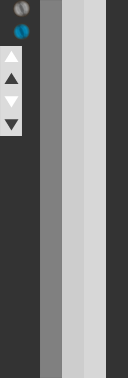
<style>
.page{position:relative;width:128px;height:378px;background:#333333}
.page>*{position:absolute;margin:0}
.t1{font:18px "NanumGothic";color:#ffffff}
.t2{font:18px "NanumGothic";color:#3f3f3f}
</style>
<div class="page">
<p class="t1" style="left:4px;top:50px;width:15px;height:12px">▲</p>
<p class="t2" style="left:4px;top:72px;width:15px;height:12px">▲</p>
<p class="t1" style="left:4px;top:96px;width:15px;height:12px">▼</p>
<p class="t2" style="left:4px;top:119px;width:15px;height:12px">▼</p>
</div>
